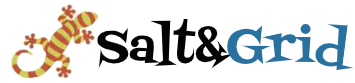
<style>
.page{position:relative;width:355px;height:83px;background:#ffffff}
.page>*{position:absolute;margin:0}
.t1{font:48px "FontdinerSwanky-Regular";color:#040404}
.t2{font:48px "FontdinerSwanky-Regular";color:#2972a0}
</style>
<div class="page">
<p class="t1" style="left:97px;top:18px;width:256px;height:52px">Salt&amp;<span class="t2">Grid</span></p>
</div>
